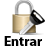
<style>
.page{position:relative;width:48px;height:48px;background:#ffffff}
.page>*{position:absolute;margin:0}
.t1{font:14.1px "MyriadPro-Bold";color:#010101}
</style>
<div class="page">
<p class="t1" style="left:4px;top:36px;width:38px;height:10px">Entrar</p>
</div>
